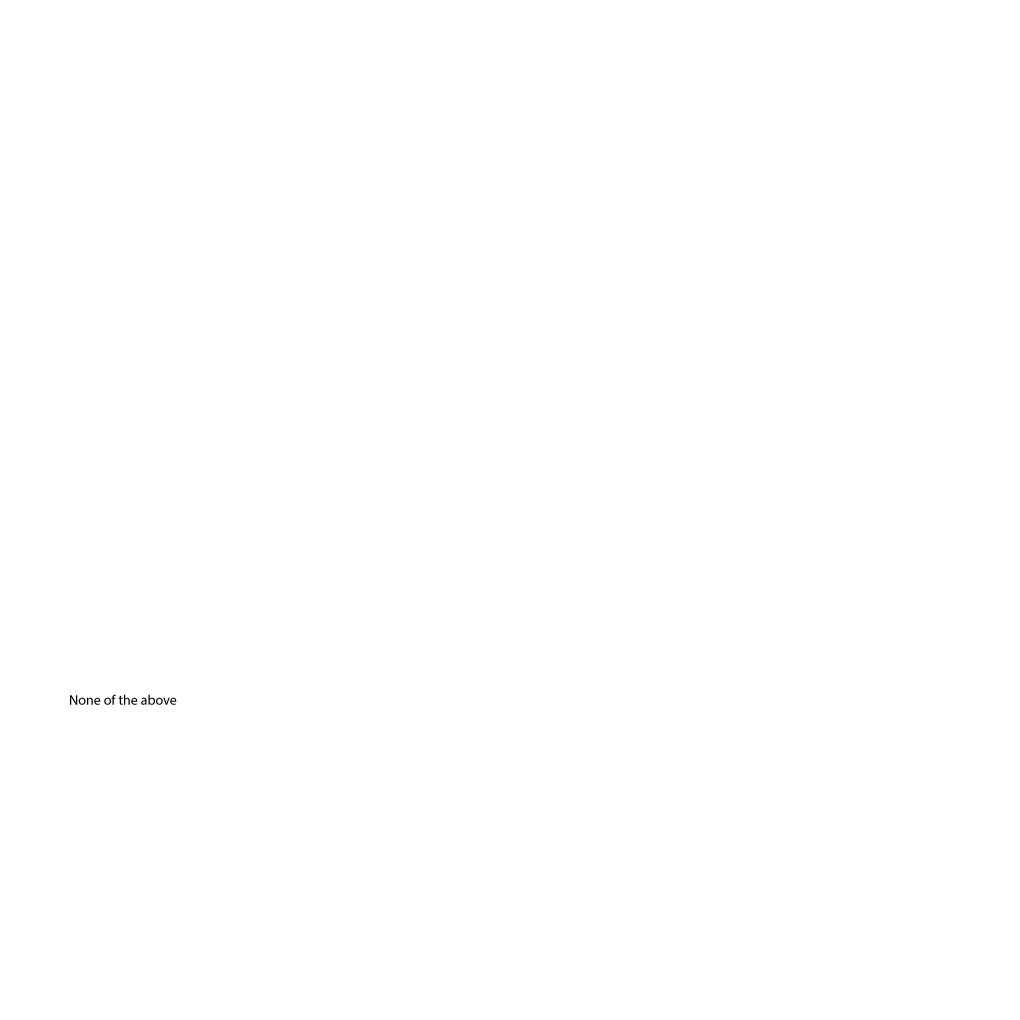
<style>
.page{position:relative;width:1020px;height:1020px;background:#ffffff}
.page>*{position:absolute;margin:0}
.t1{font:14px "MyriadPro-Regular";color:#000000}
</style>
<div class="page">
<p class="t1" style="left:70px;top:694px;width:107px;height:11px">None of the above</p>
</div>
